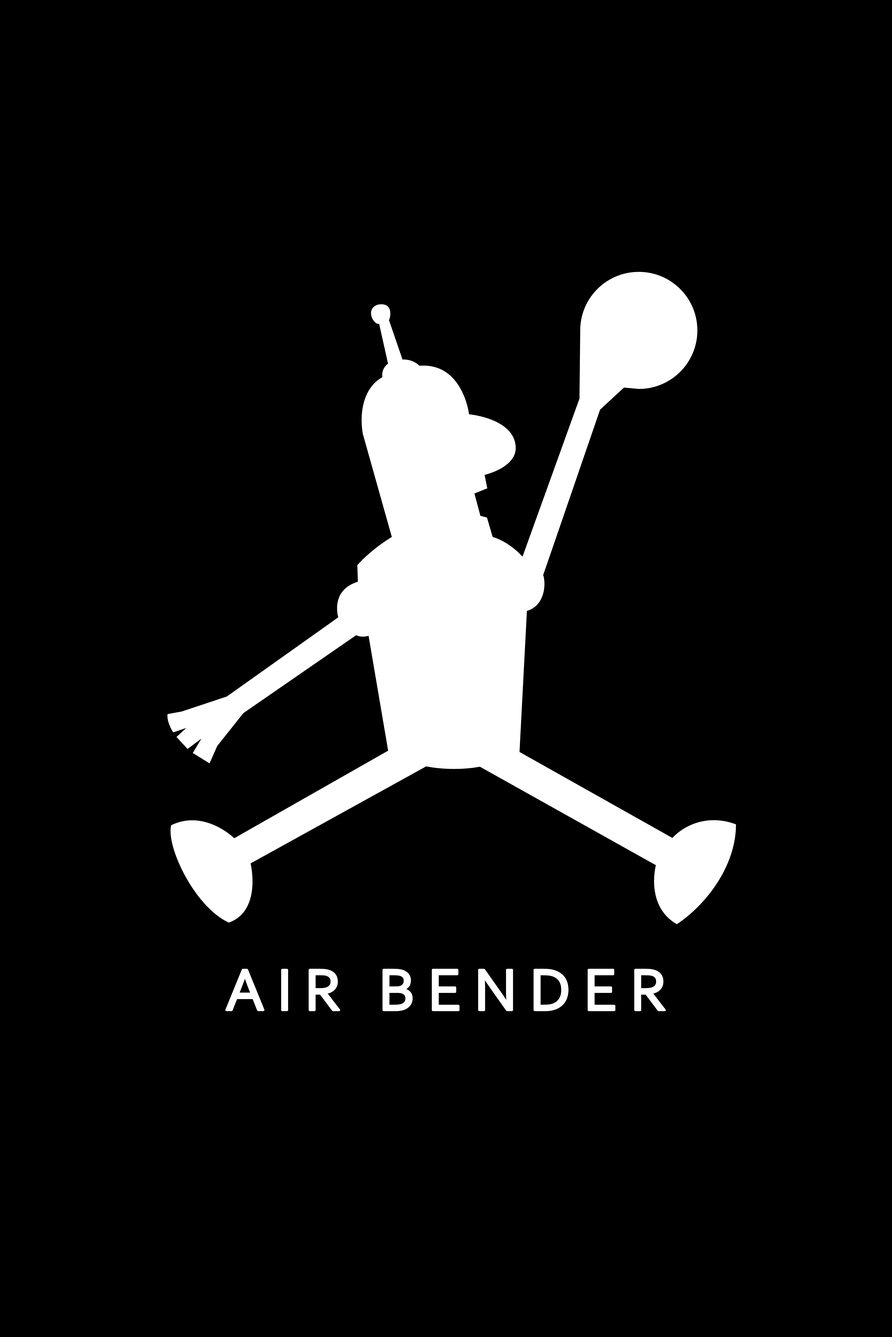
<style>
.page{position:relative;width:892px;height:1337px;background:#000000}
.page>*{position:absolute;margin:0}
.t1{font:61.9px "Corbel";letter-spacing:0.2em;color:#ffffff}
</style>
<div class="page">
<p class="t1" style="left:226px;top:970px;width:439px;height:40px">AIR BENDER</p>
</div>
